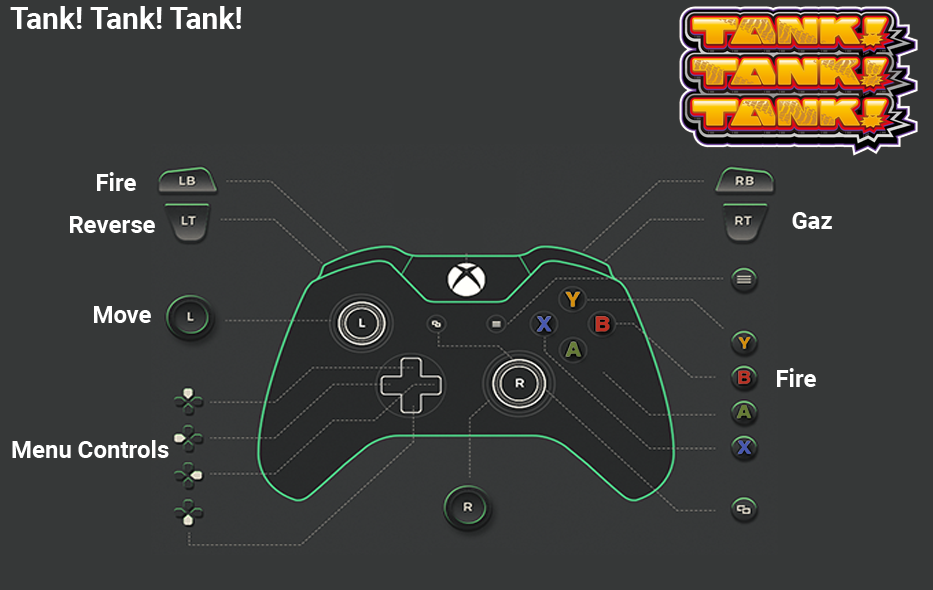
<style>
.page{position:relative;width:933px;height:590px;background:#363838}
.page>*{position:absolute;margin:0}
.t1{font:30px "Roboto-Bold";color:#ffffff}
.t2{font:24px "Roboto-Bold";color:#ffffff}
</style>
<div class="page">
<p class="t1" style="left:10px;top:6px;width:231px;height:23px">Tank! Tank! Tank!</p>
<p class="t2" style="left:97px;top:172px;width:39px;height:19px">Fire</p>
<p class="t2" style="left:70px;top:216px;width:85px;height:17px">Reverse</p>
<p class="t2" style="left:792px;top:212px;width:40px;height:17px">Gaz</p>
<p class="t2" style="left:94px;top:306px;width:57px;height:17px">Move</p>
<p class="t2" style="left:777px;top:368px;width:39px;height:19px">Fire</p>
<p class="t2" style="left:12px;top:440px;width:157px;height:18px">Menu Controls</p>
</div>
